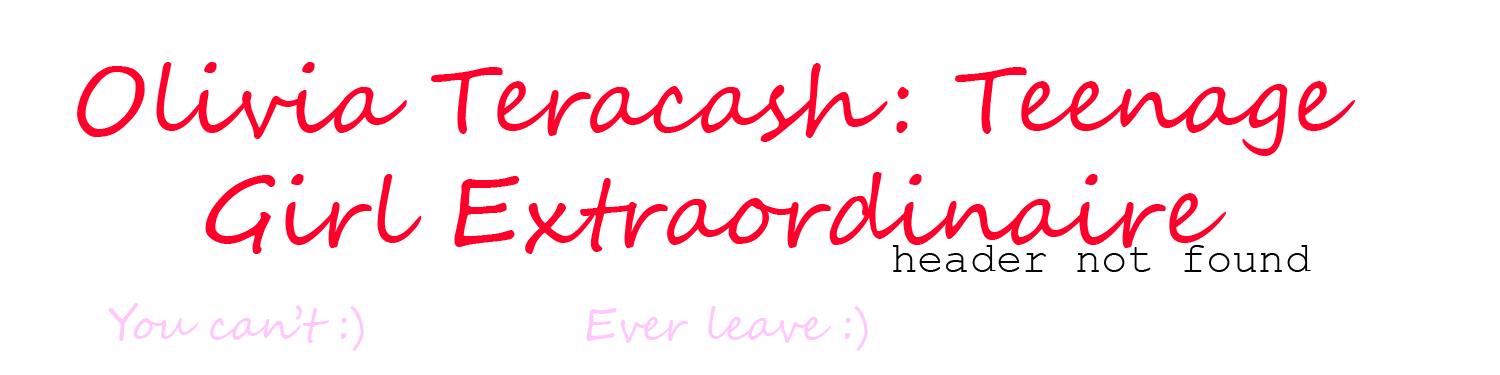
<style>
.page{position:relative;width:1500px;height:375px;background:#ffffff}
.page>*{position:absolute;margin:0}
.t1{font:93.7px "SegoeScript";color:#ff002a}
.t2{font:43.7px "CourierNewPSMT";color:#000000}
.t3{font:43.7px "SegoeScript";color:#ffc7fe}
</style>
<div class="page">
<p class="t1" style="left:77px;top:62px;width:1278px;height:192px;text-align:center">Olivia Teracash: Teenage Girl Extraordinaire</p>
<p class="t2" style="left:892px;top:245px;width:419px;height:27px">header not found</p>
<p class="t3" style="left:108px;top:303px;width:256px;height:48px">You can’t :)</p>
<p class="t3" style="left:586px;top:306px;width:282px;height:45px">Ever leave :)</p>
</div>
